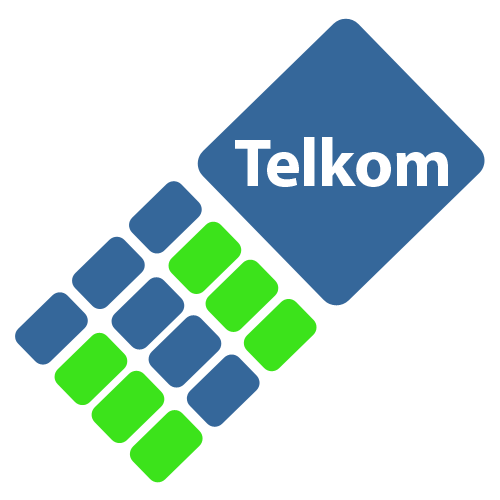
<style>
.page{position:relative;width:500px;height:500px;background:#ffffff}
.page>*{position:absolute;margin:0}
.t1{font:68.4px "MyriadPro-Bold";letter-spacing:-0.01em;color:#ffffff}
</style>
<div class="page">
<p class="t1" style="left:235px;top:137px;width:213px;height:50px">Telkom</p>
</div>
